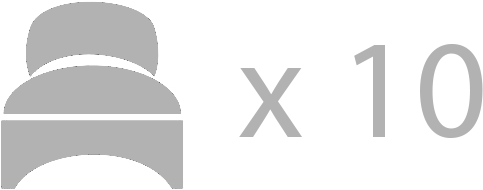
<style>
.page{position:relative;width:483px;height:190px;background:#ffffff}
.page>*{position:absolute;margin:0}
.t1{font:141.9px "MyriadPro-Regular";letter-spacing:0.02em;color:#b2b2b2}
</style>
<div class="page">
<p class="t1" style="left:239px;top:44px;width:244px;height:94px">x 10</p>
</div>
